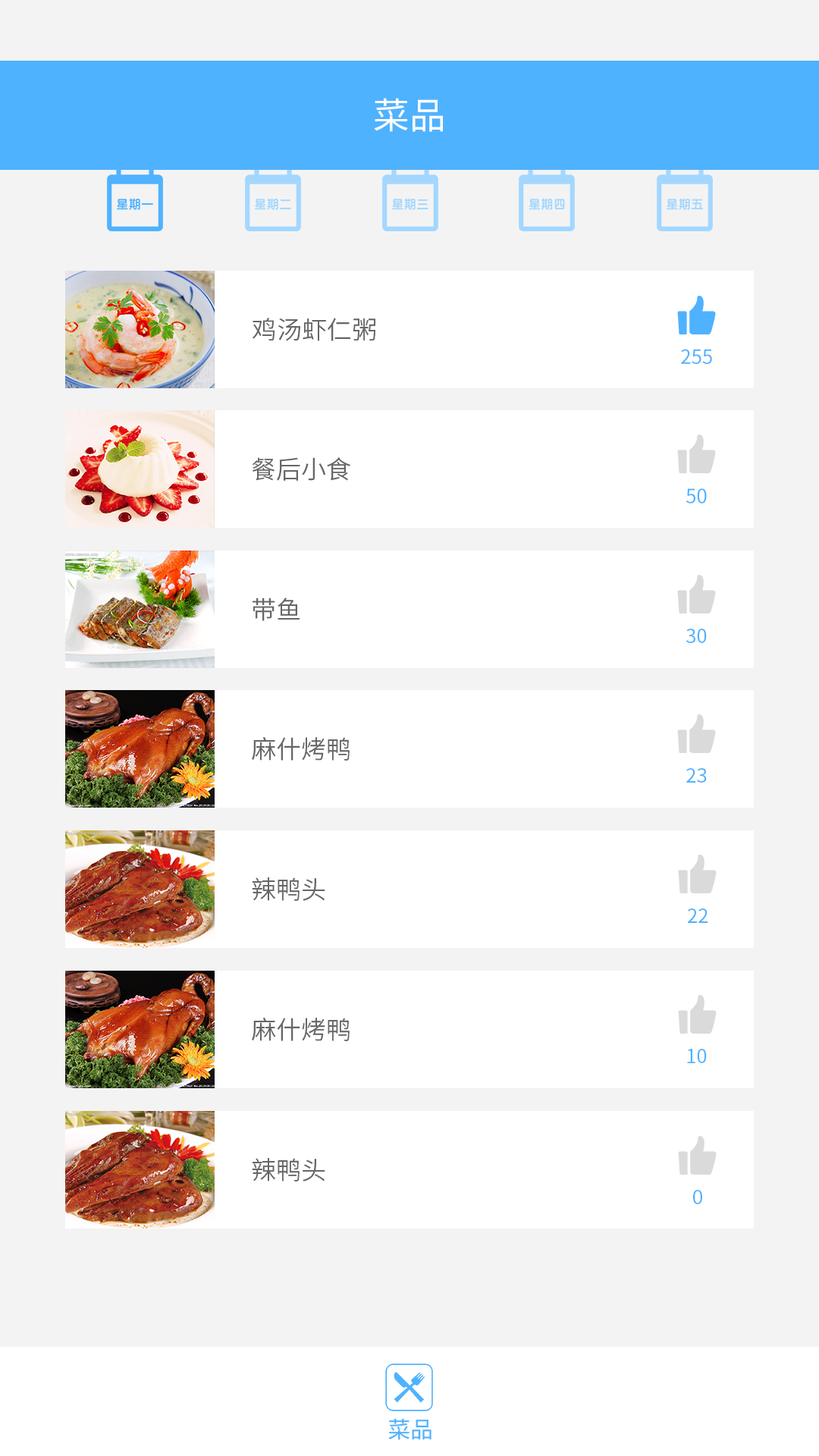
<style>
.page{position:relative;width:819px;height:1456px;background:#ffffff}
.page>*{position:absolute;margin:0}
.t1{font:36.4px "SourceHanSansCN-Regular";color:#fffefe}
.t2{font:25px "SourceHanSansCN-Normal";color:#666666}
.t3{font:19.7px "SourceHanSansCN-Regular";color:#4fb2ff}
.t4{font:22.7px "SourceHanSansCN-Regular";color:#4fb2ff}
</style>
<div class="page">
<p class="t1" style="left:374px;top:98px;width:69px;height:34px">菜品</p>
<p class="t2" style="left:252px;top:318px;width:123px;height:23px">鸡汤虾仁粥</p>
<p class="t3" style="left:681px;top:349px;width:31px;height:15px">255</p>
<p class="t2" style="left:252px;top:457px;width:99px;height:24px">餐后小食</p>
<p class="t3" style="left:686px;top:488px;width:21px;height:16px">50</p>
<p class="t2" style="left:253px;top:598px;width:47px;height:23px">带鱼</p>
<p class="t3" style="left:686px;top:629px;width:21px;height:14px">30</p>
<p class="t2" style="left:252px;top:737px;width:98px;height:24px">麻什烤鸭</p>
<p class="t3" style="left:686px;top:768px;width:21px;height:15px">23</p>
<p class="t2" style="left:252px;top:877px;width:73px;height:24px">辣鸭头</p>
<p class="t3" style="left:688px;top:908px;width:20px;height:15px">22</p>
<p class="t2" style="left:252px;top:1018px;width:98px;height:23px">麻什烤鸭</p>
<p class="t3" style="left:687px;top:1049px;width:20px;height:14px">10</p>
<p class="t2" style="left:252px;top:1158px;width:73px;height:23px">辣鸭头</p>
<p class="t3" style="left:693px;top:1190px;width:9px;height:14px">0</p>
<p class="t4" style="left:388px;top:1418px;width:43px;height:22px">菜品</p>
</div>
